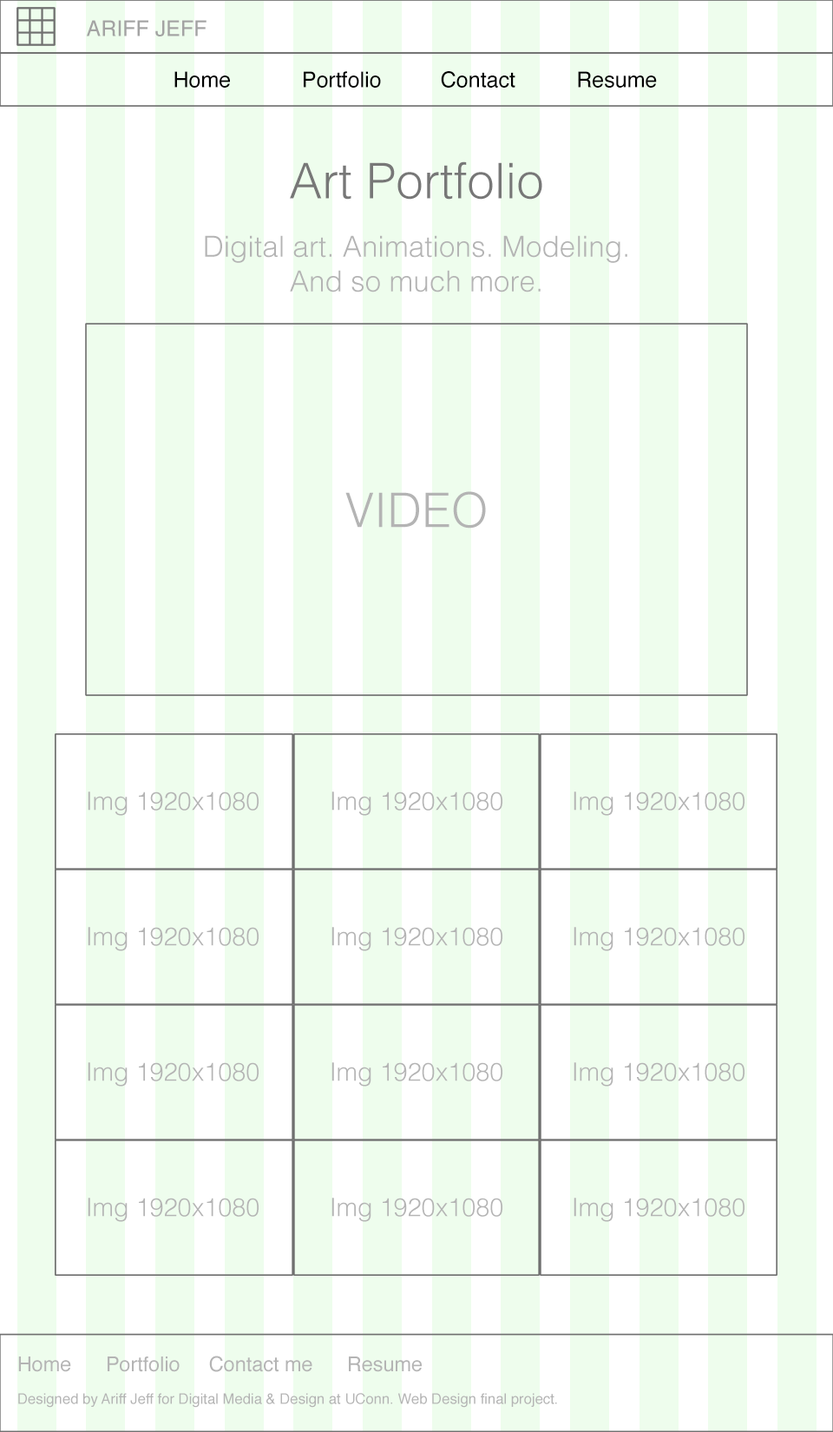
<style>
.page{position:relative;width:833px;height:1432px;background:#eefded}
.page>*{position:absolute;margin:0}
.t1{font:21.7px "Helvetica";color:#a3a3a3}
.t2{font:21.7px "Helvetica";color:#000000}
.t3{font:49.3px "Helvetica-Light";color:#777777}
.t4{font:28.9px "Helvetica-Light";color:#b4b4b4}
.t5{font:47.8px "Helvetica-Light";color:#b4b4b4}
.t6{font:25.1px "Helvetica-Light";color:#b4b4b4}
.t7{font:20.3px "Helvetica";color:#b4b4b4}
.t8{font:14.5px "Helvetica";color:#b4b4b4}
</style>
<div class="page">
<p class="t1" style="left:87px;top:20px;width:119px;height:16px">ARIFF JEFF</p>
<p class="t2" style="left:174px;top:71px;width:56px;height:17px">Home</p>
<p class="t2" style="left:304px;top:71px;width:77px;height:17px">Portfolio</p>
<p class="t2" style="left:441px;top:71px;width:74px;height:17px">Contact</p>
<p class="t2" style="left:578px;top:71px;width:79px;height:17px">Resume</p>
<p class="t3" style="left:290px;top:161px;width:252px;height:39px">Art Portfolio</p>
<p class="t4" style="left:205px;top:235px;width:422px;height:57px;text-align:center">Digital art. Animations. Modeling.<br>And so much more.</p>
<p class="t5" style="left:345px;top:491px;width:141px;height:37px">VIDEO</p>
<p class="t6" style="left:88px;top:791px;width:171px;height:25px">Img 1920x1080</p>
<p class="t6" style="left:331px;top:791px;width:171px;height:25px">Img 1920x1080</p>
<p class="t6" style="left:574px;top:791px;width:170px;height:25px">Img 1920x1080</p>
<p class="t6" style="left:88px;top:927px;width:171px;height:24px">Img 1920x1080</p>
<p class="t6" style="left:331px;top:927px;width:171px;height:24px">Img 1920x1080</p>
<p class="t6" style="left:574px;top:927px;width:170px;height:24px">Img 1920x1080</p>
<p class="t6" style="left:88px;top:1062px;width:171px;height:24px">Img 1920x1080</p>
<p class="t6" style="left:331px;top:1062px;width:171px;height:24px">Img 1920x1080</p>
<p class="t6" style="left:574px;top:1062px;width:170px;height:24px">Img 1920x1080</p>
<p class="t6" style="left:88px;top:1197px;width:171px;height:25px">Img 1920x1080</p>
<p class="t6" style="left:331px;top:1197px;width:171px;height:25px">Img 1920x1080</p>
<p class="t6" style="left:574px;top:1197px;width:170px;height:25px">Img 1920x1080</p>
<p class="t7" style="left:18px;top:1356px;width:53px;height:16px">Home</p>
<p class="t7" style="left:108px;top:1356px;width:72px;height:16px">Portfolio</p>
<p class="t7" style="left:209px;top:1355px;width:103px;height:17px">Contact me</p>
<p class="t7" style="left:349px;top:1356px;width:73px;height:16px">Resume</p>
<p class="t8" style="left:18px;top:1393px;width:539px;height:14px">Designed by Ariff Jeff for Digital Media &amp; Design at UConn. Web Design final project.</p>
</div>
